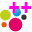
<style>
.page{position:relative;width:32px;height:32px;background:#ffffff}
.page>*{position:absolute;margin:0}
.t1{font:18px "GillSans-UltraBold";color:#ff00e4}
</style>
<div class="page">
<p class="t1" style="left:9px;top:2px;width:23px;height:11px">++</p>
</div>
